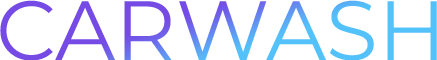
<style>
.page{position:relative;width:437px;height:60px;background:#ffffff}
.page>*{position:absolute;margin:0}
.t1{font:84px "Montserrat-Regular"}
</style>
<div class="page">
<p class="t1" style="left:0px;top:0px;width:437px;height:61px">CARWASH</p>
</div>
